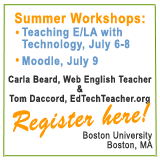
<style>
.page{position:relative;width:160px;height:160px;background:#ffffff}
.page>*{position:absolute;margin:0}
.t1{font:14.4px "Arial-BoldMT";letter-spacing:0.055em;color:#ff9900;scale:0.83 1}
.t2{font:12px "Arial-BoldMT";letter-spacing:0.055em;color:#ff9900;scale:0.85 1}
.t3{font:4.8px "Arial-BoldMT";letter-spacing:0.055em;color:#ffffff;scale:0.85 1}
.t4{font:6px "Arial-BoldMT";letter-spacing:0.055em;color:#ffffff;scale:0.85 1}
.t5{font:12px "Arial-BoldMT";letter-spacing:0.055em;color:#6699cc;scale:0.83 1}
.t6{font:4.8px "Arial-BoldMT";letter-spacing:0.055em;color:#ffffff;scale:0.83 1}
.t7{font:9.6px "Arial-BoldMT";letter-spacing:0.055em;color:#333333;scale:0.83 1}
.t8{font:28.8px "Artisan-";letter-spacing:0.055em;color:#ff9900;scale:0.83 1}
.t9{font:9.6px "ArialMT";letter-spacing:0.055em;color:#333333;scale:0.83 1}
</style>
<div class="page">
<p class="t1" style="left:14px;top:12px;width:131px;height:14px">Summer Workshops:</p>
<p class="t2" style="left:15px;top:30px;width:4px;height:32px">•<br><span class="t3">x<br><br></span><span class="t4">x<br></span>•</p>
<p class="t5" style="left:22px;top:27px;width:108px;height:41px">Teaching E/LA with <br>Technology, July 6-8<br><span class="t6">x<br></span>Moodle, July 9</p>
<p class="t7" style="left:8px;top:75px;width:144px;height:29px;text-align:center">Carla Beard, Web English Teacher<br>&amp;<br>Tom Daccord, EdTechTeacher.org</p>
<p class="t8" style="left:12px;top:102px;width:139px;height:36px;rotate:-4deg">Register here!</p>
<p class="t9" style="left:83px;top:131px;width:70px;height:19px;text-align:right">Boston University<br>Boston, MA</p>
</div>
